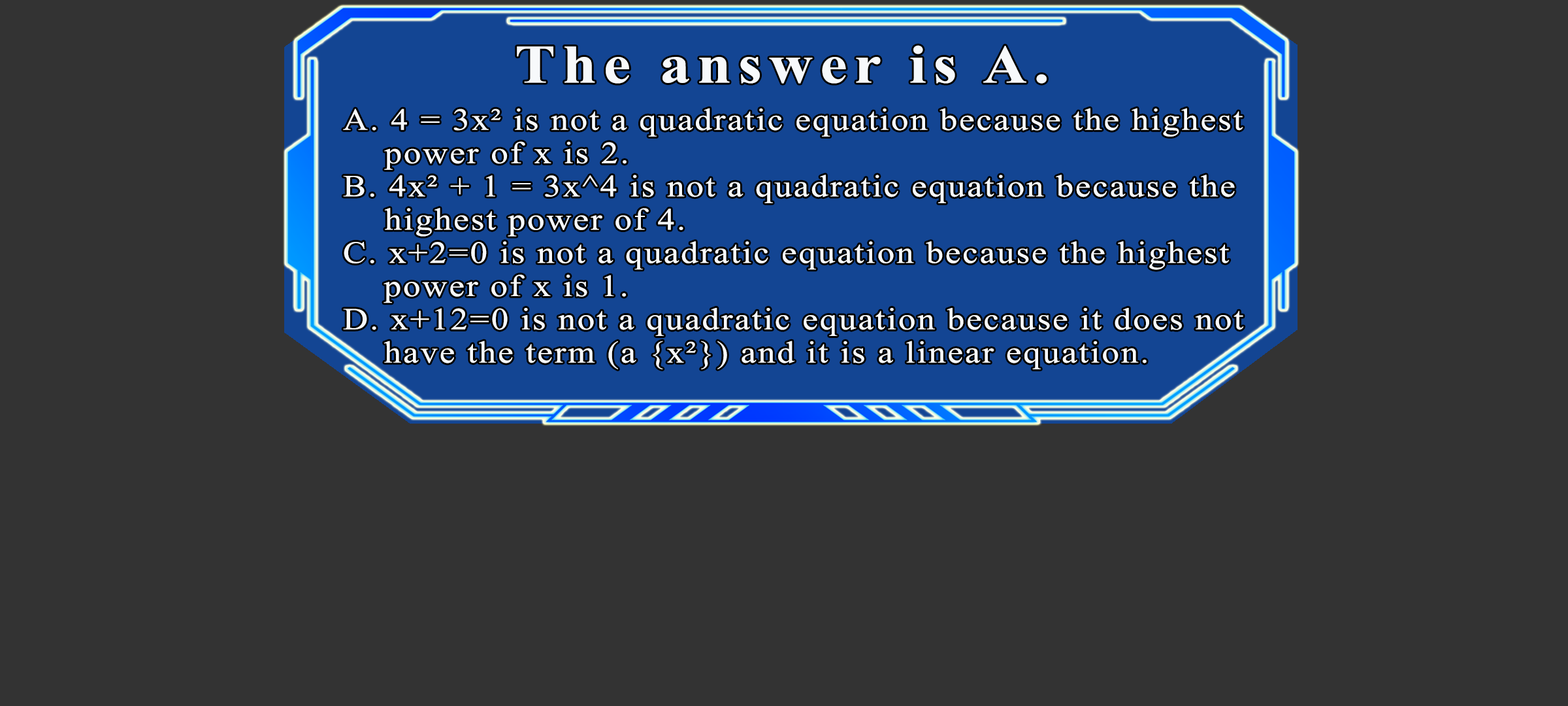
<style>
.page{position:relative;width:1568px;height:706px;background:#333333}
.page>*{position:absolute;margin:0}
.t1{font:54.4px "TimesNewRomanPS-BoldMT";letter-spacing:0.115em;color:#f7f9fb;scale:1.12 1}
.t2{font:30.9px/33.2px "TimesNewRomanPSMT";letter-spacing:0.055em;color:#f7f9fb;scale:1.12 1}
</style>
<div class="page">
<p class="t1" style="left:517px;top:45px;width:530px;height:39px">The answer is A.</p>
<p class="t2" style="left:343px;top:108px;width:901px;height:261px">A. 4 = 3x² is not a quadratic equation because the highest<br>   power of x is 2.<br>B. 4x² + 1 = 3x^4 is not a quadratic equation because the<br>   highest power of 4.<br>C. x+2=0 is not a quadratic equation because the highest<br>  power of x is 1.<br>D. x+12=0 is not a quadratic equation because it does not<br>  have the term (a {x²}) and it is a linear equation.</p>
</div>
